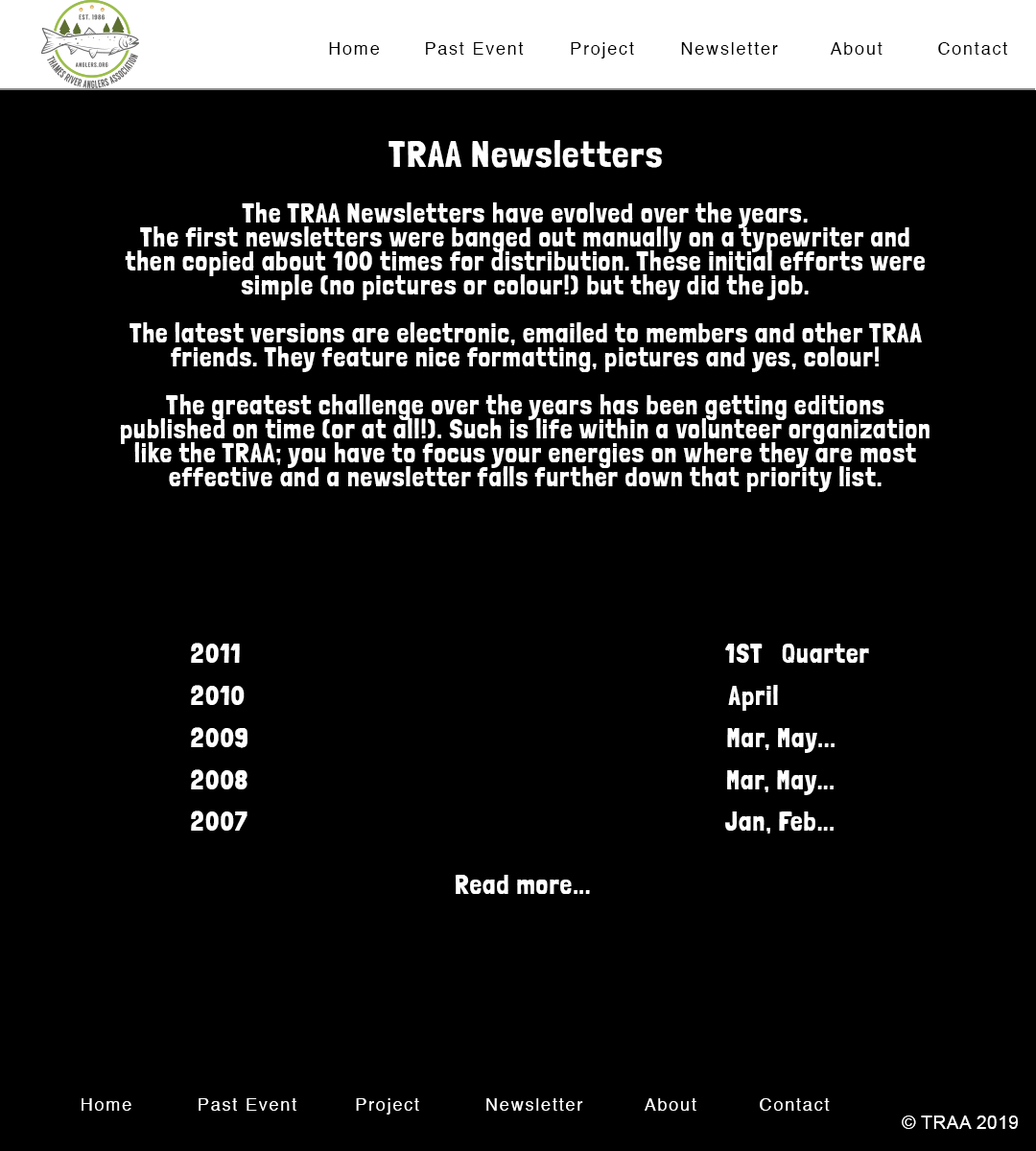
<style>
.page{position:relative;width:1036px;height:1151px;background:#000000}
.page>*{position:absolute;margin:0}
.t1{font:17.3px "Helvetica";letter-spacing:0.1em;color:#010101}
.t2{font:17.3px "Helvetica";letter-spacing:0.1em;color:#000000}
.t3{font:37.2px "LondrinaSolid-Regular";letter-spacing:0.04em;color:#ffffff}
.t4{font:26.9px/24px "LondrinaSolid-Regular";letter-spacing:0.04em;color:#ffffff}
.t5{font:26.9px/21px "LondrinaSolid-Regular";letter-spacing:0.04em;color:#ffffff}
.t6{font:17.3px "Helvetica";letter-spacing:0.1em;color:#ffffff}
.t7{font:18.4px "ArialMT";letter-spacing:0.02em;color:#ffffff}
</style>
<div class="page">
<p class="t1" style="left:329px;top:42px;width:51px;height:13px">Home</p>
<p class="t2" style="left:426px;top:42px;width:98px;height:13px">Past Event</p>
<p class="t2" style="left:571px;top:42px;width:63px;height:17px">Project</p>
<p class="t2" style="left:681px;top:42px;width:97px;height:13px">Newsletter</p>
<p class="t2" style="left:830px;top:42px;width:52px;height:13px">About</p>
<p class="t2" style="left:938px;top:42px;width:69px;height:13px">Contact</p>
<p class="t3" style="left:388px;top:140px;width:274px;height:28px">TRAA Newsletters</p>
<p class="t4" style="left:120px;top:202px;width:809px;height:290px;text-align:center">The TRAA Newsletters have evolved over the years.<br>The first newsletters were banged out manually on a typewriter and then copied about 100 times for distribution. These initial efforts were simple (no pictures or colour!) but they did the job.<br><br>The latest versions are electronic, emailed to members and other TRAA friends. They feature nice formatting, pictures and yes, colour!<br><br>The greatest challenge over the years has been getting editions published on time (or at all!). Such is life within a volunteer organization like the TRAA; you have to focus your energies on where they are most effective and a newsletter falls further down that priority list.</p>
<p class="t5" style="left:191px;top:643px;width:678px;height:251px">2011                                                                           1ST   Quarter<br><br>2010                                                                           April<br><br>2009                                                                          Mar, May...<br>           <br>2008                                                                          Mar, May...<br><br>2007                                                                          Jan, Feb...<br><br><br>                                         Read more...</p>
<p class="t6" style="left:82px;top:1098px;width:49px;height:13px">Home</p>
<p class="t6" style="left:199px;top:1098px;width:97px;height:13px">Past Event</p>
<p class="t6" style="left:356px;top:1098px;width:63px;height:17px">Project</p>
<p class="t6" style="left:486px;top:1098px;width:97px;height:13px">Newsletter</p>
<p class="t6" style="left:645px;top:1098px;width:51px;height:13px">About</p>
<p class="t6" style="left:760px;top:1098px;width:70px;height:13px">Contact</p>
<p class="t7" style="left:902px;top:1116px;width:116px;height:13px">© TRAA 2019</p>
</div>
